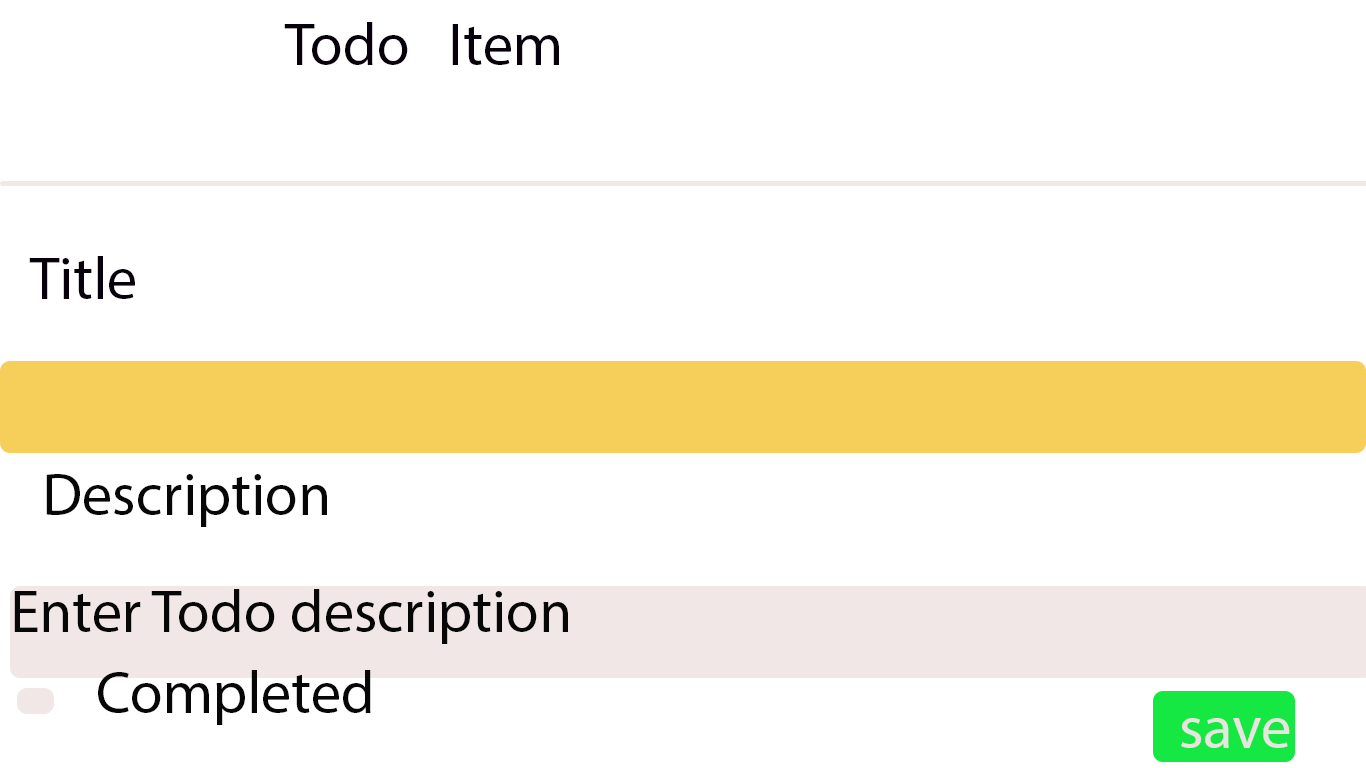
<style>
.page{position:relative;width:1366px;height:768px;background:#ffffff}
.page>*{position:absolute;margin:0}
.t1{font:60px "MyriadPro-Regular";color:#06010a}
.t2{font:60px "MyriadPro-Regular";color:#070707}
.t3{font:61.3px "MyriadPro-Regular";color:#e7e5df}
</style>
<div class="page">
<p class="t1" style="left:284px;top:22px;width:275px;height:43px">Todo   Item</p>
<p class="t1" style="left:29px;top:256px;width:106px;height:43px">Title</p>
<p class="t2" style="left:46px;top:474px;width:281px;height:53px">Description</p>
<p class="t2" style="left:14px;top:589px;width:554px;height:55px">Enter Todo description</p>
<p class="t2" style="left:98px;top:670px;width:273px;height:55px">Completed</p>
<p class="t3" style="left:1181px;top:718px;width:109px;height:30px">save</p>
</div>
